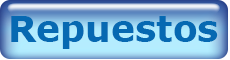
<style>
.page{position:relative;width:230px;height:60px}
.page>*{position:absolute;margin:0}
.t1{font:36px "Verdana-Bold";color:#0669b2}
</style>
<div class="page">
<p class="t1" style="left:11px;top:16px;width:207px;height:33px">Repuestos</p>
</div>
